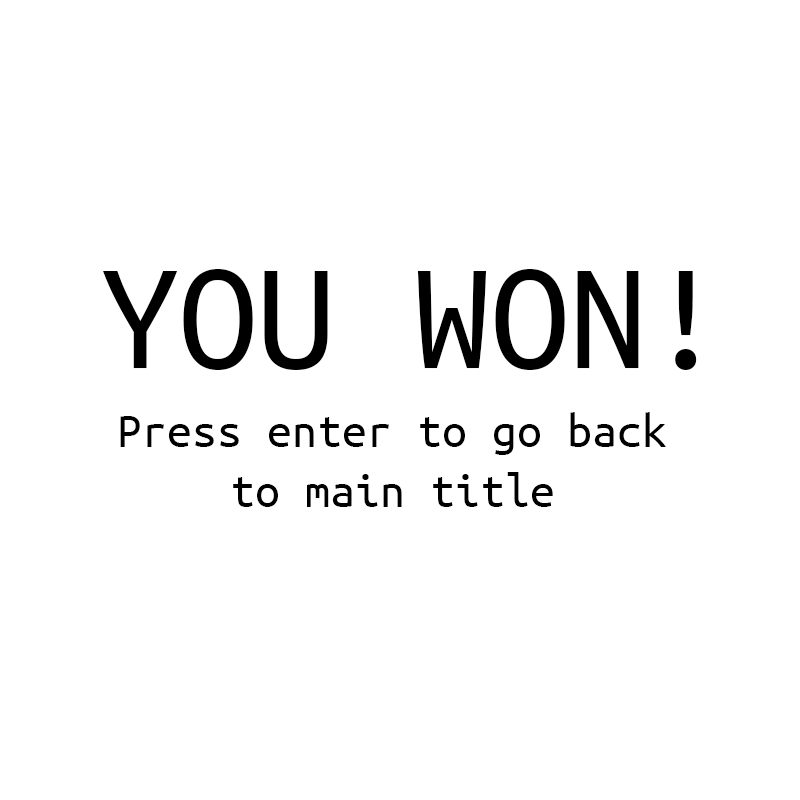
<style>
.page{position:relative;width:800px;height:800px;background:#ffffff}
.page>*{position:absolute;margin:0}
.t1{font:155.9px "UbuntuMono-Regular";color:#000000}
.t2{font:50px "UbuntuMono-Regular";color:#000000}
</style>
<div class="page">
<p class="t1" style="left:103px;top:269px;width:594px;height:101px">YOU WON!</p>
<p class="t2" style="left:120px;top:412px;width:546px;height:95px;text-align:center">Press enter to go back<br>to main title</p>
</div>
